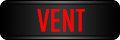
<style>
.page{position:relative;width:120px;height:40px}
.page>*{position:absolute;margin:0}
.t1{font:32px "PathwayGothicOne-Regular";color:#ff0000}
</style>
<div class="page">
<p class="t1" style="left:37px;top:9px;width:48px;height:23px">VENT</p>
</div>
